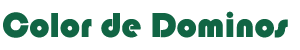
<style>
.page{position:relative;width:300px;height:50px;background:#ffffff}
.page>*{position:absolute;margin:0}
.t1{font:36px "Bauhaus93";color:#116544}
</style>
<div class="page">
<p class="t1" style="left:3px;top:11px;width:285px;height:27px">Color de Dominos</p>
</div>
